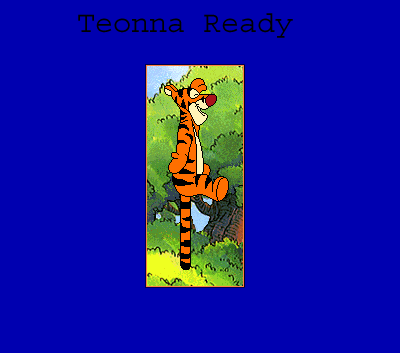
<style>
.page{position:relative;width:400px;height:353px;background:#0000b0}
.page>*{position:absolute;margin:0}
.t1{font:30px "Courier";color:#000000}
</style>
<div class="page">
<p class="t1" style="left:78px;top:13px;width:215px;height:25px">Teonna Ready</p>
</div>
